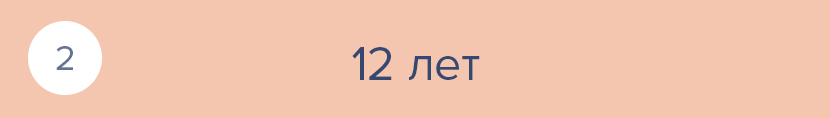
<style>
.page{position:relative;width:830px;height:118px;background:#f4c6b0}
.page>*{position:absolute;margin:0}
.t1{font:36px "ProximaNova-Regular";color:#647493}
.t2{font:48px "ProximaNova-Regular";color:#344870}
</style>
<div class="page">
<p class="t1" style="left:56px;top:46px;width:17px;height:24px">2</p>
<p class="t2" style="left:352px;top:47px;width:128px;height:33px">12 лет</p>
</div>
